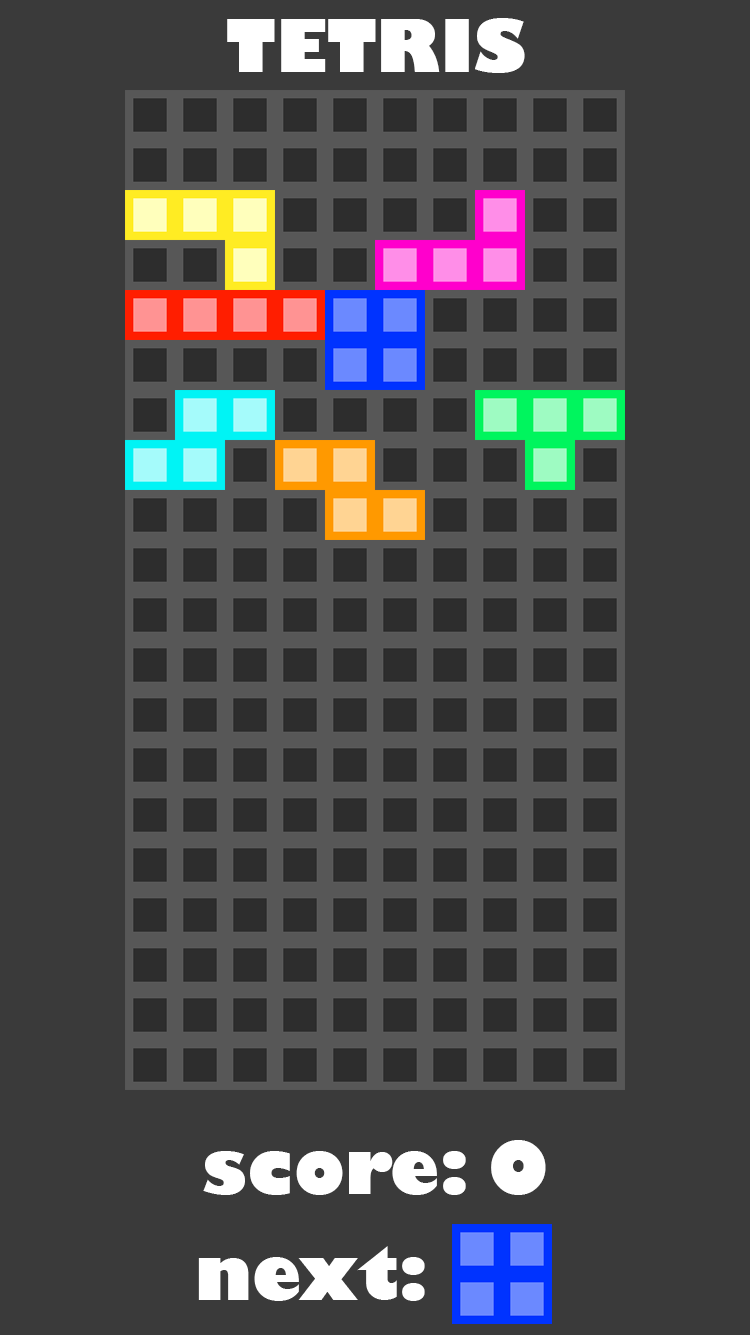
<style>
.page{position:relative;width:750px;height:1335px;background:#3a3a3a}
.page>*{position:absolute;margin:0}
.t1{font:71px "GillSans-UltraBold";color:#ffffff}
</style>
<div class="page">
<p class="t1" style="left:227px;top:18px;width:298px;height:55px">TETRIS</p>
<p class="t1" style="left:203px;top:1140px;width:343px;height:55px">score: 0</p>
</div>
